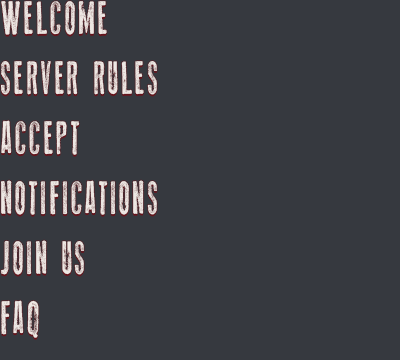
<style>
.page{position:relative;width:400px;height:360px;background:#36393f}
.page>*{position:absolute;margin:0}
.t1{font:48px "ThinPress";letter-spacing:0.075em;color:#e6ddda}
.t2{font:48px "ThinPress";letter-spacing:0.075em;color:#ede7e3}
</style>
<div class="page">
<p class="t1" style="left:1px;top:3px;width:106px;height:34px">WELCOME</p>
<p class="t2" style="left:1px;top:1px;width:106px;height:34px">WELCOME</p>
<p class="t1" style="left:1px;top:63px;width:156px;height:34px">SERVER RULES</p>
<p class="t2" style="left:1px;top:61px;width:156px;height:34px">SERVER RULES</p>
<p class="t2" style="left:1px;top:122px;width:79px;height:35px">ACCEPT</p>
<p class="t2" style="left:1px;top:120px;width:79px;height:35px">ACCEPT</p>
<p class="t1" style="left:1px;top:182px;width:156px;height:35px">NOTIFICATIONS</p>
<p class="t2" style="left:1px;top:180px;width:156px;height:35px">NOTIFICATIONS</p>
<p class="t1" style="left:1px;top:242px;width:83px;height:35px">JOIN US</p>
<p class="t2" style="left:1px;top:240px;width:83px;height:35px">JOIN US</p>
<p class="t2" style="left:1px;top:302px;width:38px;height:38px">FAQ</p>
<p class="t2" style="left:1px;top:300px;width:38px;height:38px">FAQ</p>
</div>
